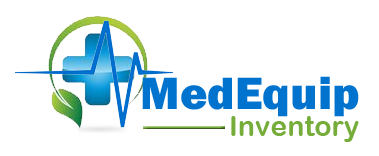
<style>
.page{position:relative;width:379px;height:156px;background:#ffffff}
.page>*{position:absolute;margin:0}
.t1{font:46.8px "FranklinGothic-Heavy";color:#0073ce}
.t2{font:28.4px "ArialRoundedMTBold";color:#76ac3a}
</style>
<div class="page">
<p class="t1" style="left:142px;top:76px;width:217px;height:41px">MedEquip</p>
<p class="t2" style="left:231px;top:116px;width:128px;height:26px">Inventory</p>
</div>
